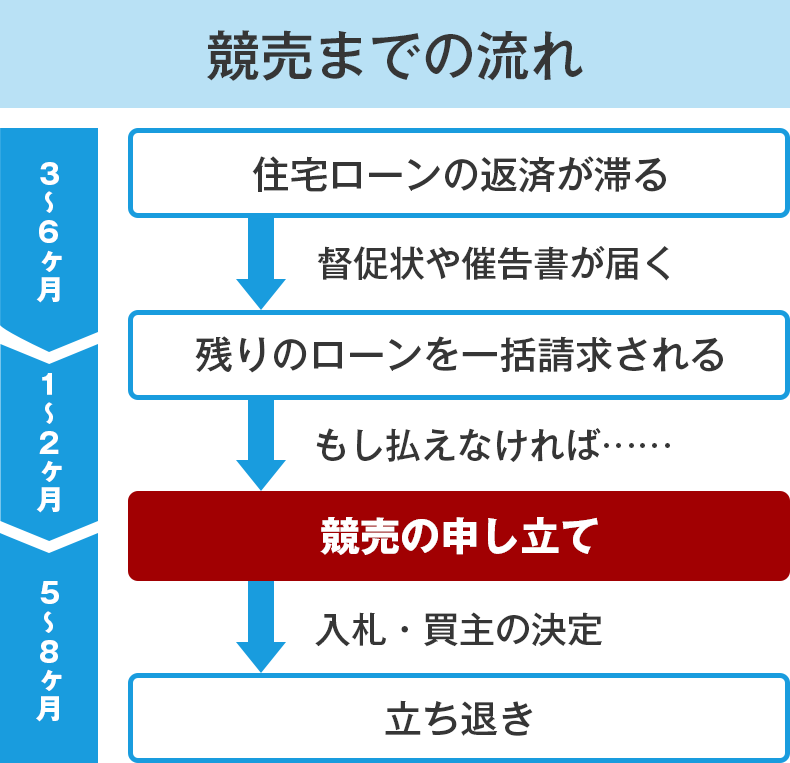
<style>
.page{position:relative;width:790px;height:763px;background:#ffffff}
.page>*{position:absolute;margin:0}
.t1{font:54px "GothicMB101Pro-Medium";color:#363636}
.t2{font:38px "GothicMB101Pro-Medium";color:#363636}
.t3{font:28px "GothicMB101Pro-Bold";color:#ffffff}
.t4{font:36px "GothicMB101Pro-Medium";color:#363636}
.t5{font:40px "GothicMB101Pro-Bold";color:#ffffff}
</style>
<div class="page">
<p class="t1" style="left:207px;top:30px;width:376px;height:51px">競売までの流れ</p>
<p class="t2" style="left:252px;top:156px;width:414px;height:37px">住宅ローンの返済が滞る</p>
<p class="t3" style="left:40px;top:162px;width:19px;height:23px">3</p>
<p class="t3" style="left:45px;top:191px;width:8px;height:22px">〜</p>
<p class="t3" style="left:39px;top:220px;width:19px;height:23px">6</p>
<p class="t4" style="left:317px;top:246px;width:353px;height:35px">督促状や催告書が届く</p>
<p class="t3" style="left:36px;top:250px;width:26px;height:53px;text-align:center">ヶ月</p>
<p class="t2" style="left:195px;top:336px;width:528px;height:37px">残りのローンを一括請求される</p>
<p class="t3" style="left:42px;top:373px;width:10px;height:22px">１</p>
<p class="t3" style="left:45px;top:402px;width:8px;height:22px">〜</p>
<p class="t3" style="left:39px;top:431px;width:20px;height:23px">２</p>
<p class="t4" style="left:316px;top:428px;width:354px;height:34px">もし払えなければ……</p>
<p class="t3" style="left:36px;top:460px;width:26px;height:53px;text-align:center">ヶ月</p>
<p class="t5" style="left:320px;top:517px;width:278px;height:38px">競売の申し立て</p>
<p class="t3" style="left:40px;top:581px;width:19px;height:23px">5</p>
<p class="t3" style="left:44px;top:611px;width:9px;height:22px">〜</p>
<p class="t4" style="left:315px;top:612px;width:287px;height:35px">入札・買主の決定</p>
<p class="t3" style="left:40px;top:640px;width:18px;height:23px">8</p>
<p class="t3" style="left:36px;top:669px;width:26px;height:53px;text-align:center">ヶ月</p>
<p class="t2" style="left:385px;top:700px;width:148px;height:36px">立ち退き</p>
</div>
